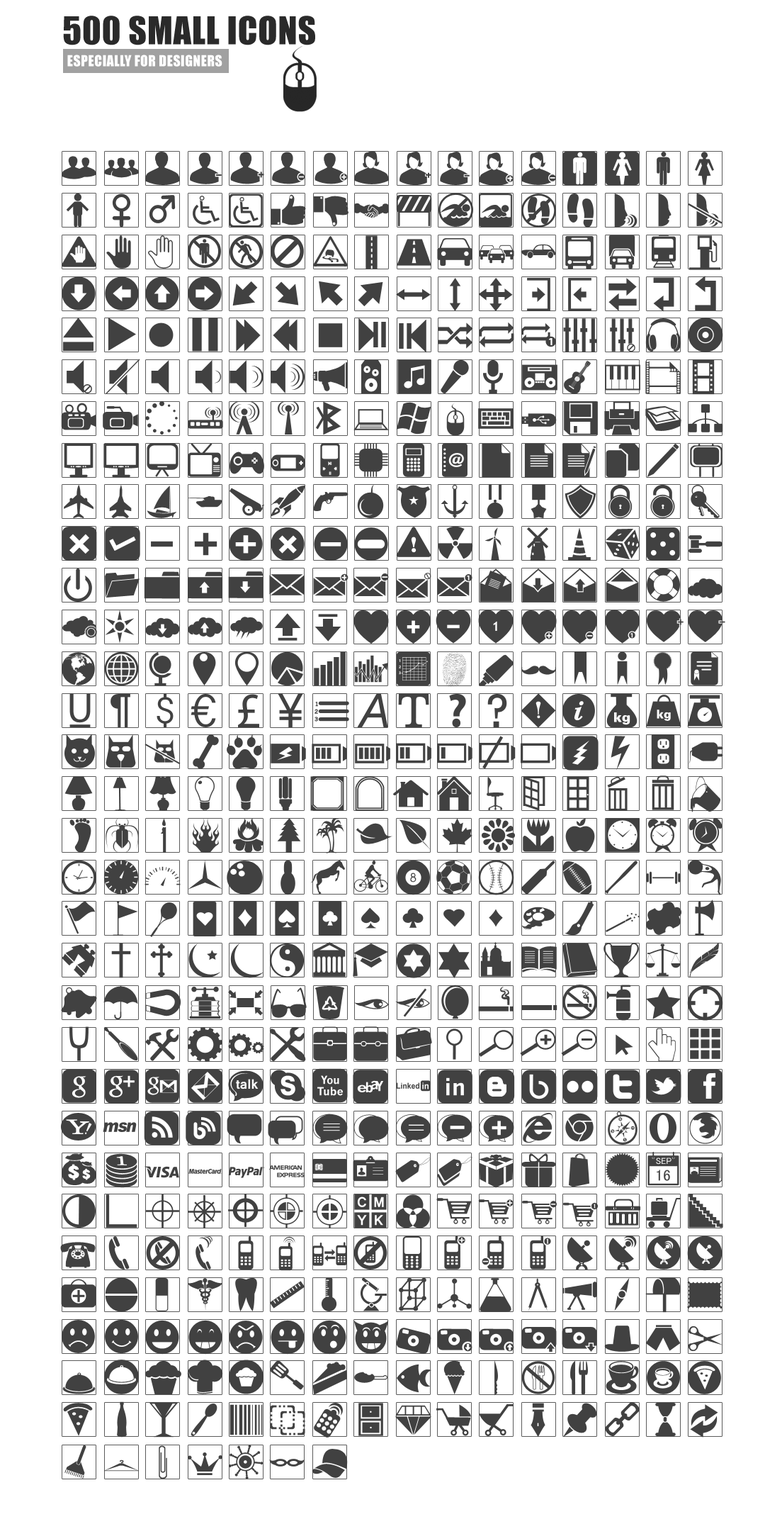
<style>
.page{position:relative;width:782px;height:1524px;background:#ffffff}
.page>*{position:absolute;margin:0}
.t1{font:35.4px "Impact";letter-spacing:0.018em;color:#2a2a2a;text-transform:uppercase}
.t2{font:14.2px "Impact";letter-spacing:0.018em;color:#ffffff;text-transform:uppercase}
</style>
<div class="page">
<p class="t1" style="left:63px;top:16px;width:252px;height:29px">500 small icons</p>
<p class="t2" style="left:67px;top:55px;width:156px;height:12px">Especially for designers</p>
</div>
